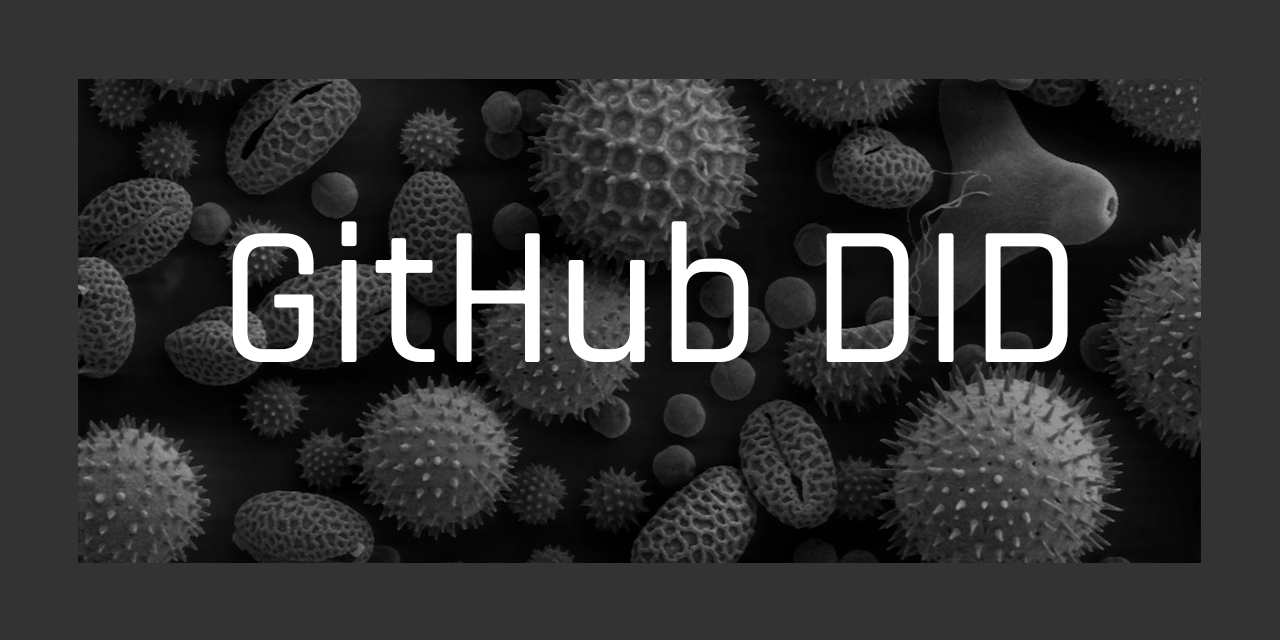
<style>
.page{position:relative;width:1280px;height:640px;background:#333333}
.page>*{position:absolute;margin:0}
.t1{font:200px "Rajdhani-Medium";color:#ffffff}
</style>
<div class="page">
<p class="t1" style="left:232px;top:221px;width:836px;height:141px">GitHub DID</p>
</div>
